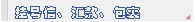
<style>
.page{position:relative;width:195px;height:22px;background:#f0f0f0}
.page>*{position:absolute;margin:0}
.t1{font:14px "STCaiyun";color:#3b5786}
</style>
<div class="page">
<p class="t1" style="left:15px;top:6px;width:125px;height:13px">挂号信、汇款、包裹</p>
</div>
